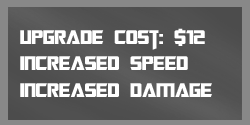
<style>
.page{position:relative;width:250px;height:125px}
.page>*{position:absolute;margin:0}
.t1{font:22px "TransformersMovie";color:#ffffff}
</style>
<div class="page">
<p class="t1" style="left:20px;top:28px;width:192px;height:69px">upgrade cost: $12<br>increased speed<br>increased damage</p>
</div>
